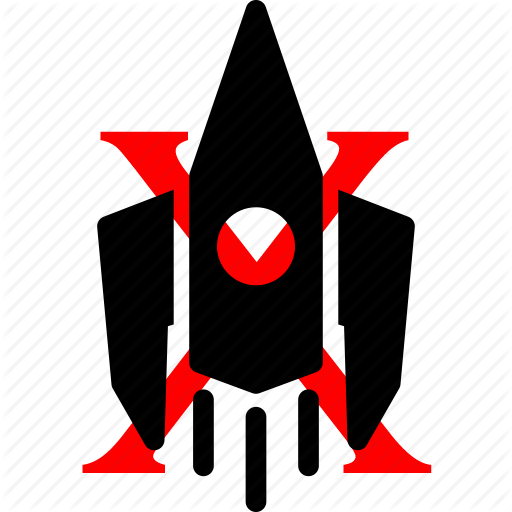
<style>
.page{position:relative;width:512px;height:512px;background:#ffffff}
.page>*{position:absolute;margin:0}
.t1{font:512px "CopperplateGothic-Light"}
</style>
<div class="page">
<p class="t1" style="left:82px;top:131px;width:350px;height:342px">X</p>
</div>
